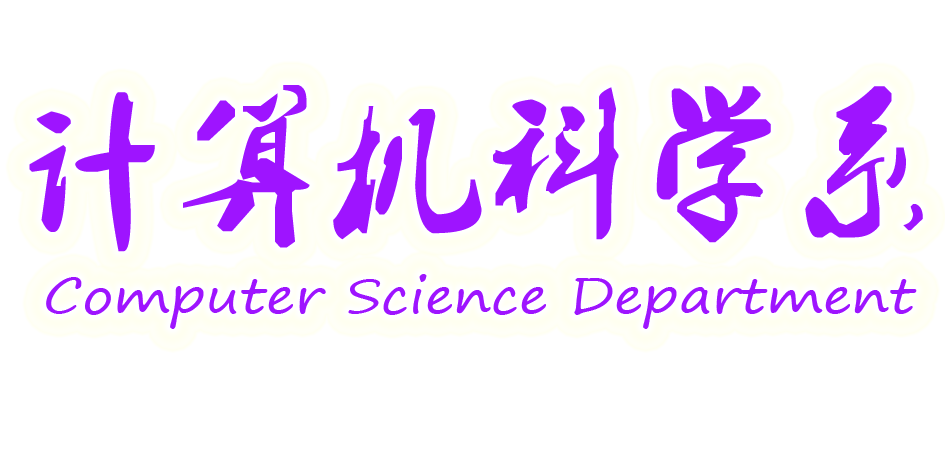
<style>
.page{position:relative;width:945px;height:472px;background:#ffffff}
.page>*{position:absolute;margin:0}
.t1{font:154.2px "2.0-";color:#9e14ff}
.t2{font:47.8px "SegoePrint";color:#9e14ff;scale:1.16 1}
</style>
<div class="page">
<p class="t1" style="left:29px;top:85px;width:894px;height:167px">计算机科学系</p>
<p class="t2" style="left:46px;top:274px;width:871px;height:55px">Computer Science Department</p>
</div>
